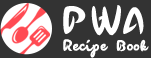
<style>
.page{position:relative;width:151px;height:58px;background:#333333}
.page>*{position:absolute;margin:0}
.t1{font:48px "mileadilan";color:#ffffff}
.t2{font:20px "mileadilan";color:#ffffff}
</style>
<div class="page">
<p class="t1" style="left:63px;top:5px;width:81px;height:31px">PWA</p>
<p class="t2" style="left:63px;top:39px;width:86px;height:19px">Recipe Book</p>
</div>
